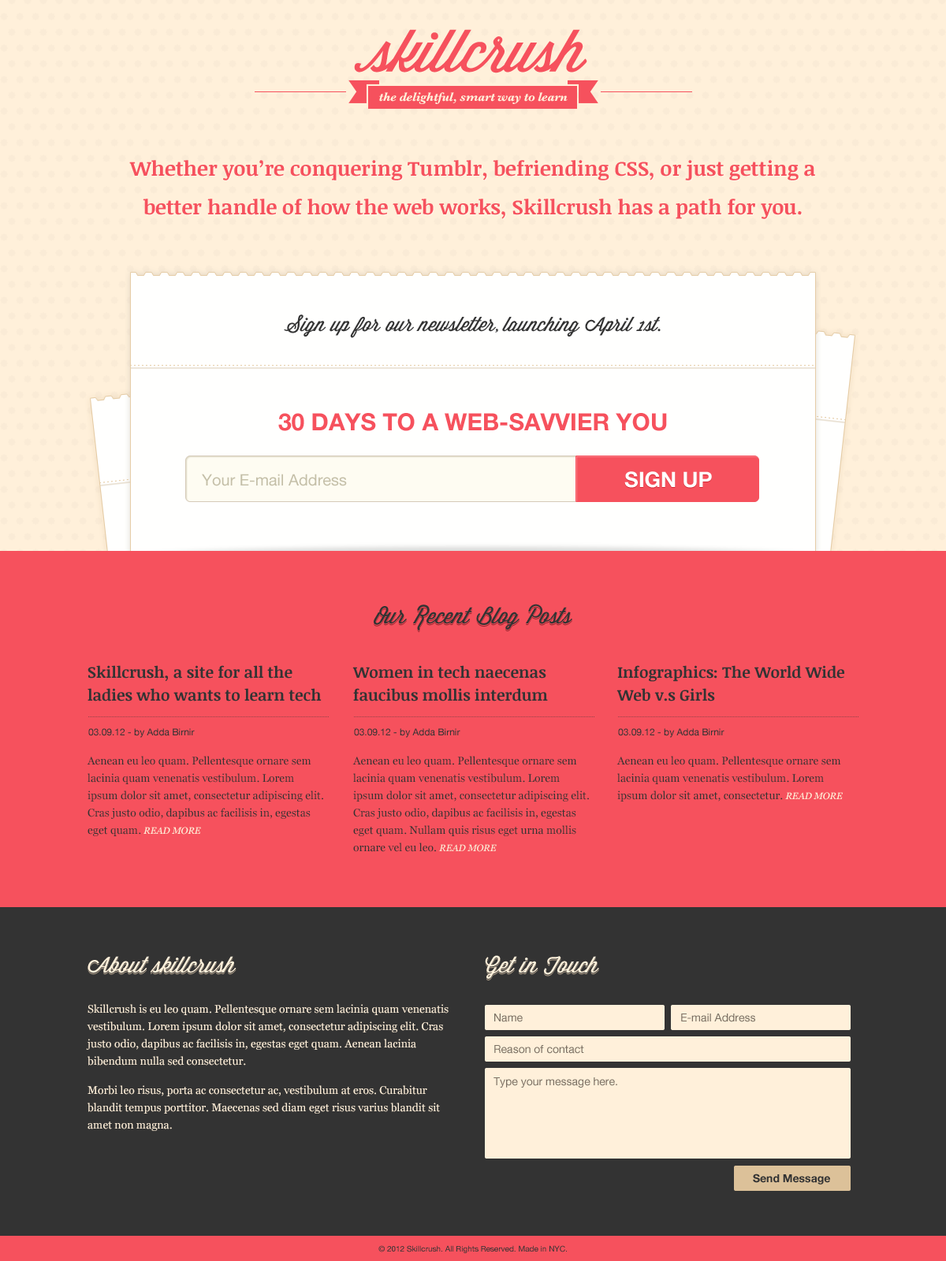
<style>
.page{position:relative;width:946px;height:1261px;background:#f6515d}
.page>*{position:absolute;margin:0}
.t1{font:12.6px "Baskerville-BoldItalic";letter-spacing:-0.02em;color:#fff0da}
.t2{font:20.5px/38.6px "NoticiaText-Bold";color:#f6515d}
.t3{font:19.7px "WisdomScriptAI";color:#333333}
.t4{font:23.6px "HelveticaNeue-Bold";color:#f6515d;text-transform:uppercase}
.t5{font:15.8px "HelveticaNeue";color:#c4bfa8}
.t6{font:21.3px "HelveticaNeue-Bold";color:#ffffff;text-transform:uppercase}
.t7{font:22.1px "WisdomScriptAI"}
.t8{font:22.1px "WisdomScriptAI";color:#333333}
.t9{font:15.8px/22.9px "NoticiaText-Bold";color:#333333}
.t10{font:9.5px "HelveticaNeue";color:#333333}
.t11{font:11px/17.3px "Georgia";color:#333333}
.t12{font:9.5px/17.3px "Georgia-Italic";color:#fff0da;text-transform:uppercase}
.t13{font:9.5px/17.3px "Georgia-Italic";color:#fbecd7;text-transform:uppercase}
.t14{font:22.1px "WisdomScriptAI";color:#fff0da}
.t15{font:11px/17.3px "Georgia";color:#fff0da}
.t16{font:11px "HelveticaNeue";color:#7a7063}
.t17{font:11px "HelveticaNeue-Bold";color:#333333}
.t18{font:7.9px "HelveticaNeue";color:#333333}
</style>
<div class="page">
<p class="t1" style="left:379px;top:92px;width:188px;height:12px">the delightful, smart way to learn</p>
<p class="t2" style="left:129px;top:160px;width:686px;height:59px;text-align:center">Whether you’re conquering Tumblr, befriending CSS, or just getting a better handle of how the web works, Skillcrush has a path for you.</p>
<p class="t3" style="left:284px;top:314px;width:376px;height:24px">Sign up for our newsletter, launching April 1st.</p>
<p class="t4" style="left:278px;top:413px;width:389px;height:18px">30 days to a web-savvier you</p>
<p class="t5" style="left:202px;top:474px;width:145px;height:12px">Your E-mail Address</p>
<p class="t6" style="left:624px;top:471px;width:88px;height:17px">Sign Up</p>
<p class="t7" style="left:374px;top:605px;width:198px;height:28px">Our Recent Blog Posts</p>
<p class="t8" style="left:374px;top:604px;width:198px;height:27px">Our Recent Blog Posts</p>
<p class="t9" style="left:87px;top:665px;width:235px;height:36px">Skillcrush, a site for all the<br>ladies who wants to learn tech</p>
<p class="t9" style="left:352px;top:665px;width:196px;height:36px">Women in tech naecenas <br>faucibus mollis interdum</p>
<p class="t9" style="left:616px;top:665px;width:228px;height:36px">Infographics: The World Wide <br>Web v.s Girls</p>
<p class="t10" style="left:88px;top:728px;width:107px;height:10px">03.09.12 - by Adda Birnir</p>
<p class="t10" style="left:354px;top:728px;width:106px;height:10px">03.09.12 - by Adda Birnir</p>
<p class="t10" style="left:618px;top:728px;width:106px;height:10px">03.09.12 - by Adda Birnir</p>
<p class="t11" style="left:87px;top:756px;width:236px;height:80px">Aenean eu leo quam. Pellentesque ornare sem lacinia quam venenatis vestibulum. Lorem ipsum dolor sit amet, consectetur adipiscing elit. Cras justo odio, dapibus ac facilisis in, egestas eget quam. <span class="t12">Read more</span></p>
<p class="t11" style="left:352px;top:756px;width:237px;height:96px">Aenean eu leo quam. Pellentesque ornare sem lacinia quam venenatis vestibulum. Lorem ipsum dolor sit amet, consectetur adipiscing elit. Cras justo odio, dapibus ac facilisis in, egestas eget quam. Nullam quis risus eget urna mollis ornare vel eu leo. <span class="t13">Read more</span></p>
<p class="t11" style="left:616px;top:756px;width:226px;height:45px">Aenean eu leo quam. Pellentesque ornare sem lacinia quam venenatis vestibulum. Lorem ipsum dolor sit amet, consectetur. <span class="t12">Read more</span></p>
<p class="t7" style="left:87px;top:958px;width:149px;height:17px">About skillcrush</p>
<p class="t14" style="left:87px;top:956px;width:149px;height:17px">About skillcrush</p>
<p class="t7" style="left:485px;top:957px;width:114px;height:23px">Get in Touch</p>
<p class="t14" style="left:485px;top:955px;width:114px;height:24px">Get in Touch</p>
<p class="t15" style="left:86px;top:1004px;width:362px;height:127px">Skillcrush is eu leo quam. Pellentesque ornare sem lacinia quam venenatis vestibulum. Lorem ipsum dolor sit amet, consectetur adipiscing elit. Cras justo odio, dapibus ac facilisis in, egestas eget quam. Aenean lacinia bibendum nulla sed consectetur.<br>Morbi leo risus, porta ac consectetur ac, vestibulum at eros. Curabitur blandit tempus porttitor. Maecenas sed diam eget risus varius blandit sit amet non magna.</p>
<p class="t16" style="left:494px;top:1013px;width:28px;height:9px">Name</p>
<p class="t16" style="left:681px;top:1013px;width:74px;height:9px">E-mail Address</p>
<p class="t16" style="left:494px;top:1045px;width:90px;height:9px">Reason of contact</p>
<p class="t16" style="left:493px;top:1077px;width:124px;height:11px">Type your message here.</p>
<p class="t17" style="left:753px;top:1173px;width:77px;height:11px">Send Message</p>
<p class="t18" style="left:378px;top:1245px;width:189px;height:8px">© 2012 Skillcrush. All Rights Reserved. Made in NYC.</p>
</div>
